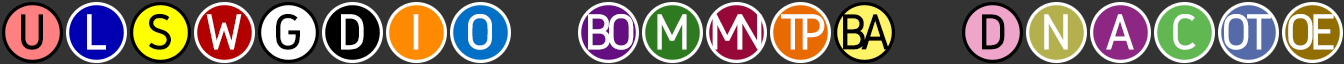
<style>
.page{position:relative;width:1344px;height:64px;background:#333333}
.page>*{position:absolute;margin:0}
.t1{font:52px "Gidole-Regular";color:#000000;font-weight:bold}
.t2{font:52px "Gidole-Regular";color:#ffffff;font-weight:bold}
.t3{font:52px "Gidole-Regular";letter-spacing:-0.14em;color:#ffffff;font-weight:bold}
.t4{font:52px "Gidole-Regular";letter-spacing:-0.23em;color:#ffffff;font-weight:bold}
.t5{font:52px "Gidole-Regular";letter-spacing:-0.16em;color:#ffffff;font-weight:bold}
.t6{font:52px "Gidole-Regular";letter-spacing:-0.14em;color:#000000;font-weight:bold}
.t7{font:52px "Gidole-Regular";letter-spacing:-0.12em;color:#ffffff;font-weight:bold}
</style>
<div class="page">
<p class="t1" style="left:21px;top:14px;width:22px;height:36px">U</p>
<p class="t2" style="left:87px;top:14px;width:19px;height:36px">L</p>
<p class="t1" style="left:148px;top:14px;width:23px;height:36px">S</p>
<p class="t2" style="left:206px;top:14px;width:36px;height:36px">W</p>
<p class="t1" style="left:276px;top:14px;width:24px;height:36px">G</p>
<p class="t2" style="left:341px;top:14px;width:23px;height:36px">D</p>
<p class="t2" style="left:413px;top:14px;width:6px;height:36px">I</p>
<p class="t2" style="left:468px;top:14px;width:24px;height:36px">O</p>
<p class="t3" style="left:588px;top:14px;width:46px;height:36px">BO</p>
<p class="t2" style="left:657px;top:14px;width:30px;height:36px">M</p>
<p class="t4" style="left:712px;top:14px;width:50px;height:36px">MN</p>
<p class="t5" style="left:781px;top:14px;width:44px;height:36px">TP</p>
<p class="t6" style="left:843px;top:14px;width:46px;height:36px">BA</p>
<p class="t1" style="left:982px;top:14px;width:23px;height:36px">D</p>
<p class="t2" style="left:1044px;top:14px;width:24px;height:36px">N</p>
<p class="t2" style="left:1106px;top:14px;width:28px;height:36px">A</p>
<p class="t2" style="left:1173px;top:14px;width:23px;height:36px">C</p>
<p class="t7" style="left:1224px;top:14px;width:47px;height:36px">OT</p>
<p class="t7" style="left:1288px;top:14px;width:46px;height:36px">OE</p>
</div>
